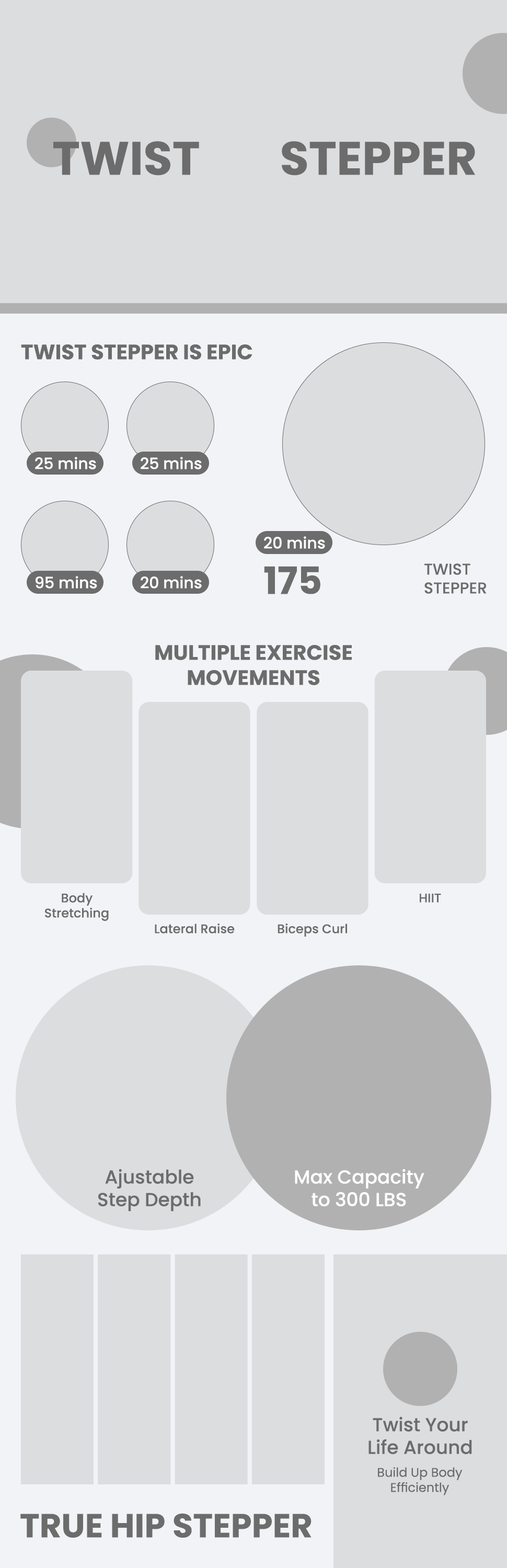
<style>
.page{position:relative;width:507px;height:1568px;background:#dcdddf}
.page>*{position:absolute;margin:0}
.t1{font:47px "Poppins-Bold";color:#6c6c6c;text-transform:uppercase}
.t2{font:20.9px "Poppins-Bold";color:#6c6c6c;text-transform:uppercase}
.t3{font:15.7px "Poppins-Medium";color:#ffffff}
.t4{font:37.6px "Poppins-Bold";color:#6c6c6c}
.t5{font:15.7px "Poppins-Medium";color:#6c6c6c}
.t6{font:12.5px "Poppins-Medium";color:#6c6c6c}
.t7{font:18.8px "Poppins-Medium";color:#6c6c6c}
.t8{font:18.8px "Poppins-Medium";color:#ffffff}
.t9{font:12.5px "Poppins-Regular";color:#6c6c6c}
.t10{font:33.5px "Poppins-Bold";color:#6c6c6c;text-transform:uppercase}
</style>
<div class="page">
<p class="t1" style="left:53px;top:141px;width:422px;height:35px">TWIST        STEPPER</p>
<p class="t2" style="left:21px;top:344px;width:231px;height:16px">TWIST STEPPER IS EPIC</p>
<p class="t3" style="left:35px;top:457px;width:61px;height:12px">25 mins</p>
<p class="t3" style="left:141px;top:457px;width:61px;height:12px">25 mins</p>
<p class="t3" style="left:264px;top:536px;width:61px;height:13px">20 mins</p>
<p class="t4" style="left:264px;top:566px;width:56px;height:28px">175</p>
<p class="t5" style="left:424px;top:563px;width:63px;height:31px">TWIST <br>STEPPER</p>
<p class="t3" style="left:36px;top:576px;width:61px;height:13px">95 mins</p>
<p class="t3" style="left:141px;top:576px;width:61px;height:13px">20 mins</p>
<p class="t2" style="left:155px;top:645px;width:197px;height:40px;text-align:center">MULTIPLE EXERCISE<br>MOVEMENTS</p>
<p class="t6" style="left:45px;top:893px;width:64px;height:28px;text-align:center">Body<br>Stretching</p>
<p class="t6" style="left:420px;top:893px;width:21px;height:10px">HIIT</p>
<p class="t6" style="left:155px;top:924px;width:80px;height:9px">Lateral Raise</p>
<p class="t6" style="left:278px;top:924px;width:69px;height:13px">Biceps Curl</p>
<p class="t7" style="left:98px;top:1169px;width:103px;height:43px;text-align:center">Ajustable<br>Step Depth</p>
<p class="t8" style="left:295px;top:1169px;width:129px;height:38px;text-align:center">Max Capacity<br>to 300 LBS</p>
<p class="t7" style="left:368px;top:1416px;width:104px;height:39px;text-align:center">Twist Your<br>Life Around</p>
<p class="t9" style="left:378px;top:1467px;width:85px;height:28px;text-align:center">Build Up Body<br>Efficiently</p>
<p class="t10" style="left:20px;top:1513px;width:292px;height:25px">TRUE HIP STEPPER</p>
</div>
